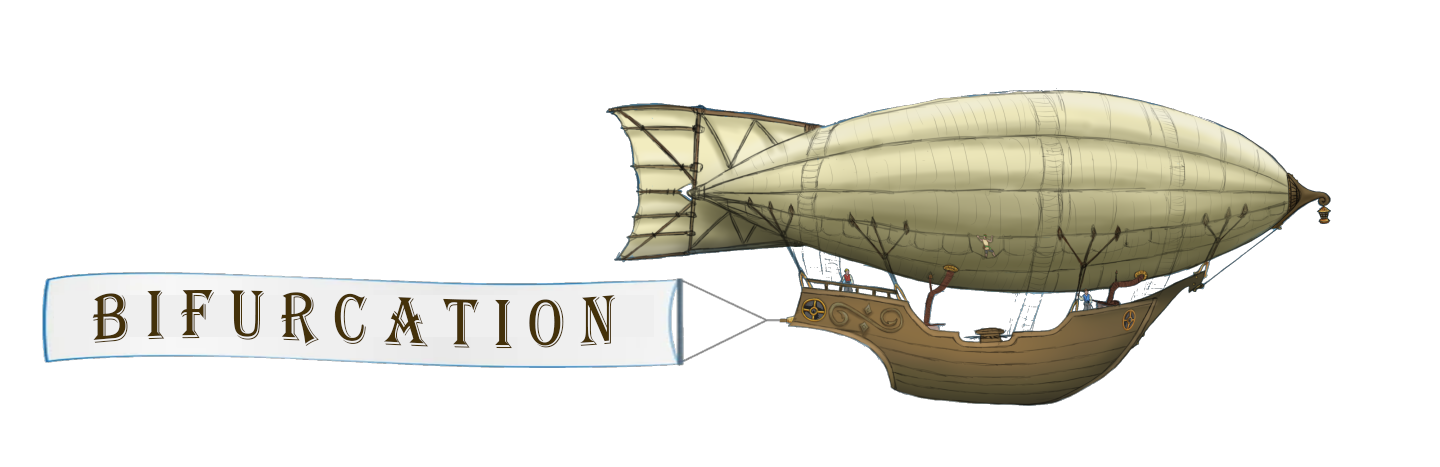
<style>
.page{position:relative;width:1440px;height:467px;background:#ffffff}
.page>*{position:absolute;margin:0}
.t1{font:72px "Algerian";letter-spacing:0.3em;color:#44310a;scale:0.8 1}
</style>
<div class="page">
<p class="t1" style="left:92px;top:290px;width:524px;height:59px">Bifurcation</p>
</div>
